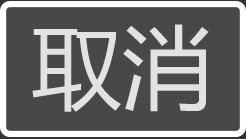
<style>
.page{position:relative;width:246px;height:139px;background:#484848}
.page>*{position:absolute;margin:0}
.t1{font:90.6px "MicrosoftYaHei";color:#e2e2e2}
</style>
<div class="page">
<p class="t1" style="left:32px;top:24px;width:177px;height:88px">取消</p>
</div>
